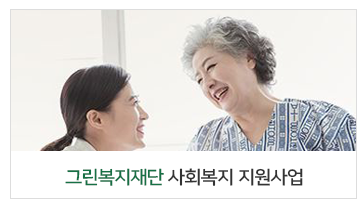
<style>
.page{position:relative;width:360px;height:200px;background:#ffffff}
.page>*{position:absolute;margin:0}
.t1{font:18.3px "NanumSquare_acB";letter-spacing:-0.01em;color:#333333;scale:1.05 1}
.t2{font:18.3px "NanumSquare_acB";letter-spacing:-0.01em;color:#167045;scale:1.05 1}
</style>
<div class="page">
<p class="t1" style="left:65px;top:168px;width:238px;height:18px"><span class="t2">그린복지재단 </span>사회복지 지원사업</p>
</div>
